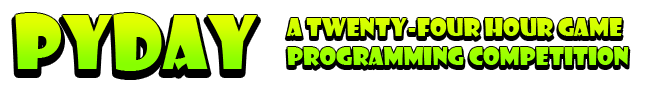
<style>
.page{position:relative;width:647px;height:90px;background:#ffffff}
.page>*{position:absolute;margin:0}
.t1{font:72px "ShowcardGothic-Reg"}
.t2{font:24px "ShowcardGothic-Reg"}
</style>
<div class="page">
<p class="t1" style="left:15px;top:13px;width:242px;height:58px">Pyday</p>
<p class="t2" style="left:286px;top:18px;width:343px;height:48px">A Twenty-Four Hour Game <br>Programming Competition</p>
</div>
